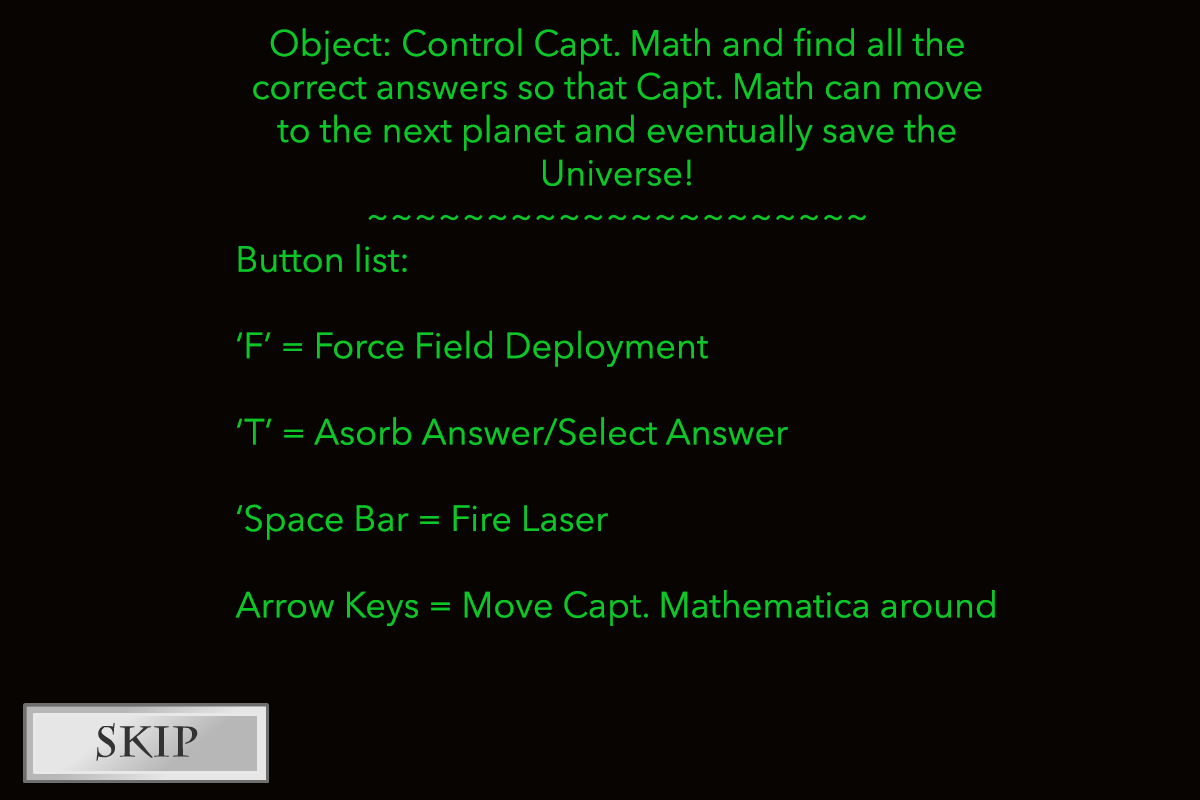
<style>
.page{position:relative;width:1200px;height:800px;background:#070401}
.page>*{position:absolute;margin:0}
.t1{font:36px "AvenirNext-Regular";color:#0cc727}
</style>
<div class="page">
<p class="t1" style="left:235px;top:28px;width:760px;height:598px;text-align:center">Object: Control Capt. Math and find all the correct answers so that Capt. Math can move to the next planet and eventually save the <br>Universe!<br>~~~~~~~~~~~~~~~~~~~~~<br>Button list:<br><br>‘F’ = Force Field Deployment<br><br>‘T’ = Asorb Answer/Select Answer<br><br>‘Space Bar = Fire Laser<br><br>Arrow Keys = Move Capt. Mathematica around</p>
</div>
